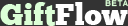
<style>
.page{position:relative;width:128px;height:26px;background:#333333}
.page>*{position:absolute;margin:0}
.t1{font:30.5px "ChunkFive";color:#ffffff}
.t2{font:30.5px "ChunkFive";color:#dcffd7}
.t3{font:30.5px "ChunkFive";letter-spacing:-0.01em;color:#dcffd7}
.t4{font:8.2px "Helvetica-Bold";letter-spacing:0.075em;color:#dcffd7}
</style>
<div class="page">
<p class="t1" style="left:0px;top:2px;width:128px;height:24px"><span class="t2">G</span><span class="t3">if</span><span class="t2">t</span>Flow</p>
<p class="t4" style="left:105px;top:0px;width:23px;height:7px">BETA</p>
</div>
